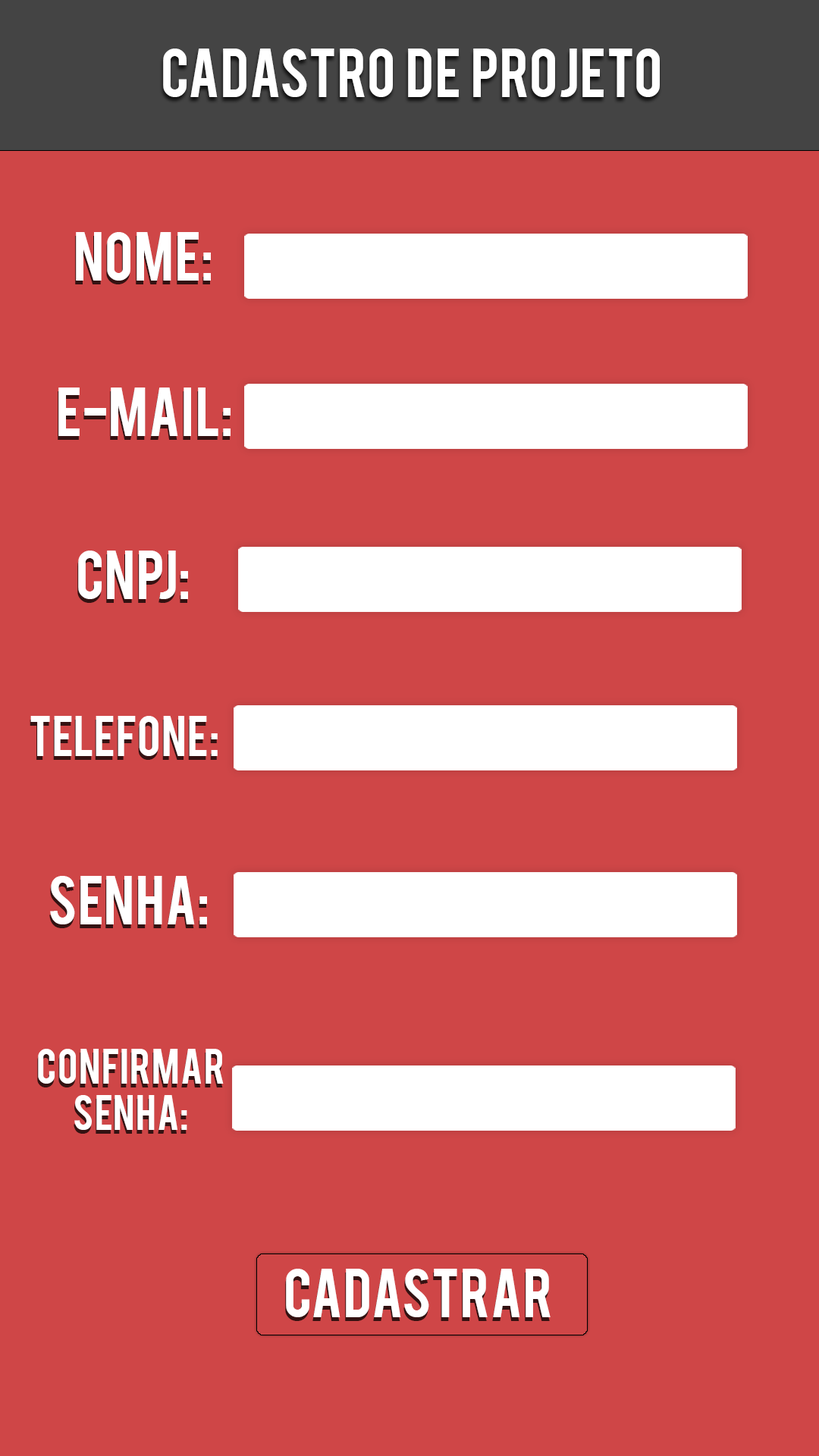
<style>
.page{position:relative;width:819px;height:1456px;background:#cf4647}
.page>*{position:absolute;margin:0}
.t1{font:54.6px "Bebas";color:#ffffff}
.t2{font:45px "Bebas";color:#ffffff}
.t3{font:38.7px "Bebas";color:#ffffff}
</style>
<div class="page">
<p class="t1" style="left:163px;top:49px;width:497px;height:48px">cadastro  de  projeto</p>
<p class="t1" style="left:76px;top:232px;width:135px;height:49px">Nome:</p>
<p class="t1" style="left:58px;top:388px;width:173px;height:48px">E-mail:</p>
<p class="t1" style="left:78px;top:551px;width:110px;height:48px">cnpj:</p>
<p class="t2" style="left:30px;top:716px;width:188px;height:40px">TELEFONE:</p>
<p class="t1" style="left:50px;top:876px;width:157px;height:48px">Senha:</p>
<p class="t3" style="left:38px;top:1049px;width:186px;height:81px;text-align:center">Confirmar<br>Senha:</p>
<p class="t1" style="left:286px;top:1269px;width:265px;height:48px">CADASTRAR</p>
</div>
